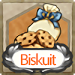
<style>
.page{position:relative;width:75px;height:75px}
.page>*{position:absolute;margin:0}
.t1{font:16px "AdobeClean-Regular";letter-spacing:-0.08em;color:#ff5a00}
</style>
<div class="page">
<p class="t1" style="left:20px;top:53px;width:37px;height:13px">Biskuit</p>
</div>
